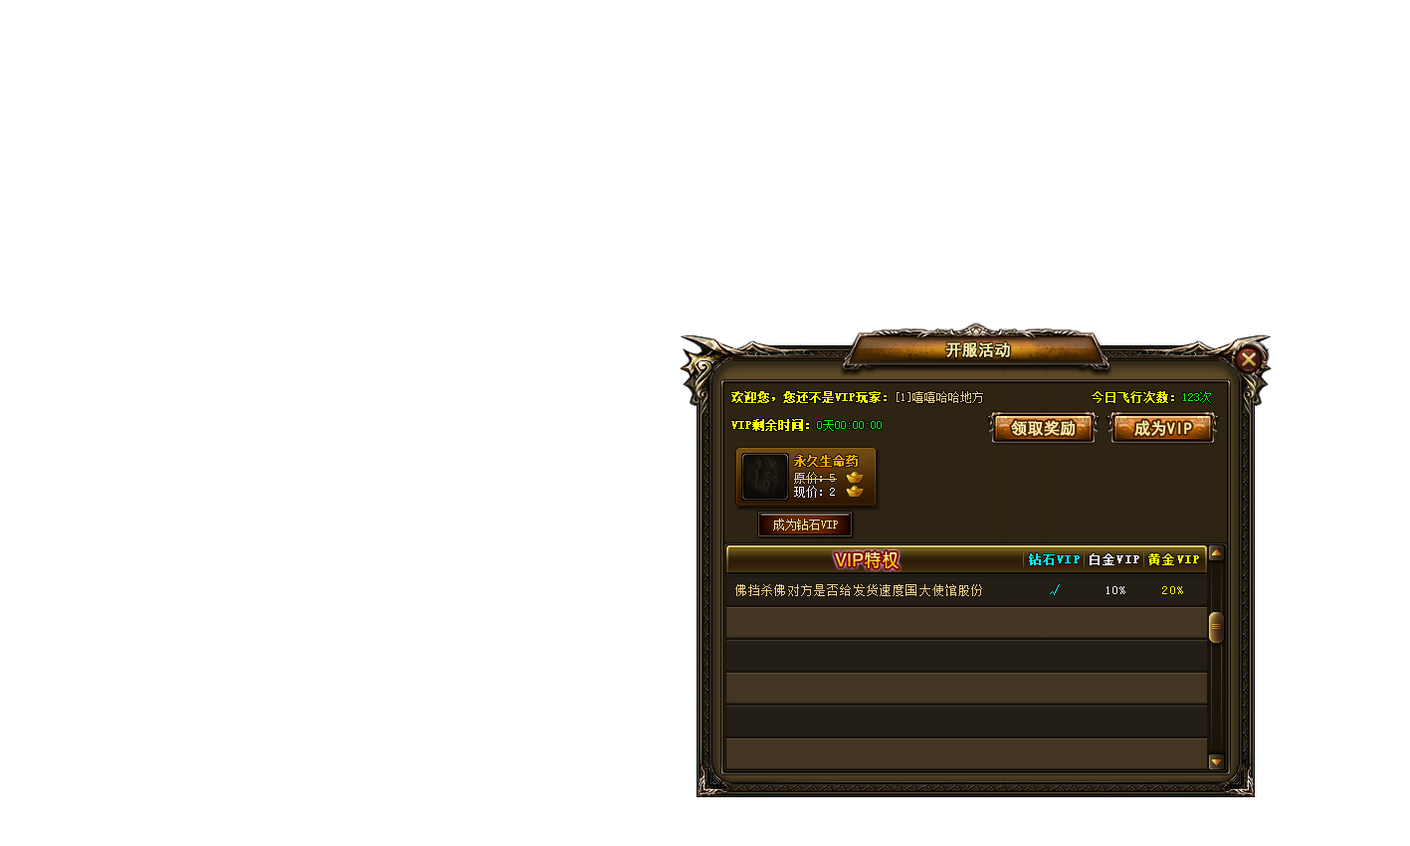
<style>
.page{position:relative;width:1410px;height:846px;background:#ffffff}
.page>*{position:absolute;margin:0}
.t1{font:15.9px "SimHei";color:#feefab;font-weight:bold}
.t2{font:11.9px/27.9px "SimSun";color:#ffff05;font-weight:bold}
.t3{font:11.9px/27.9px "SimSun";color:#edd18c}
.t4{font:11.9px/27.9px "SimSun";color:#00ff00}
.t5{font:11.9px "SimSun";color:#f5ab01;font-weight:bold}
.t6{font:11.9px/13.9px "SimSun";color:#edd18c}
.t7{font:11.9px/13.9px "SimSun";color:#fffffd}
.t8{font:11.9px "SimSun";color:#f8eaa7}
.t9{font:11.9px "SimSun";letter-spacing:0.1em;color:#02f6ff;font-weight:bold}
.t10{font:11.9px "SimSun";letter-spacing:0.1em;color:#ffffff;font-weight:bold}
.t11{font:11.9px "SimSun";letter-spacing:0.1em;color:#ffff00;font-weight:bold}
.t12{font:11.9px "SimSun";letter-spacing:0.1em;color:#edd18c}
.t13{font:11.9px "SimSun";letter-spacing:0.1em;color:#02f6ff}
.t14{font:11.9px "SimSun";letter-spacing:0.1em;color:#ffffff}
.t15{font:11.9px "SimSun";letter-spacing:0.1em;color:#ffff00}
</style>
<div class="page">
<p class="t1" style="left:945px;top:342px;width:65px;height:15px">开服活动</p>
<p class="t2" style="left:731px;top:391px;width:480px;height:40px">欢迎您，您还不是VIP玩家：<span class="t3">[1]嘻嘻哈哈地方                  </span>今日飞行次数：<span class="t4">123次<br></span>VIP剩余时间：<span class="t4">0天00:00:00</span></p>
<p class="t5" style="left:794px;top:455px;width:64px;height:12px">永久生命药</p>
<p class="t6" style="left:794px;top:472px;width:43px;height:25px">原价：5<br><span class="t7">现价：2</span></p>
<p class="t8" style="left:773px;top:518px;width:65px;height:12px">成为钻石VIP</p>
<p class="t9" style="left:1029px;top:553px;width:170px;height:12px">钻石VIP <span class="t10">白金VIP </span><span class="t11">黄金VIP</span></p>
<p class="t12" style="left:735px;top:584px;width:448px;height:12px">佛挡杀佛对方是否给发货速度国大使馆股份         <span class="t13">√      </span><span class="t14">10%     </span><span class="t15">20%</span></p>
</div>
